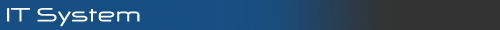
<style>
.page{position:relative;width:500px;height:30px;background:#164f84}
.page>*{position:absolute;margin:0}
.t1{font:24px "SarunsResidentEvil";color:#ffffff;font-weight:bold;scale:1.43 1}
</style>
<div class="page">
<p class="t1" style="left:7px;top:8px;width:133px;height:19px">IT System</p>
</div>
